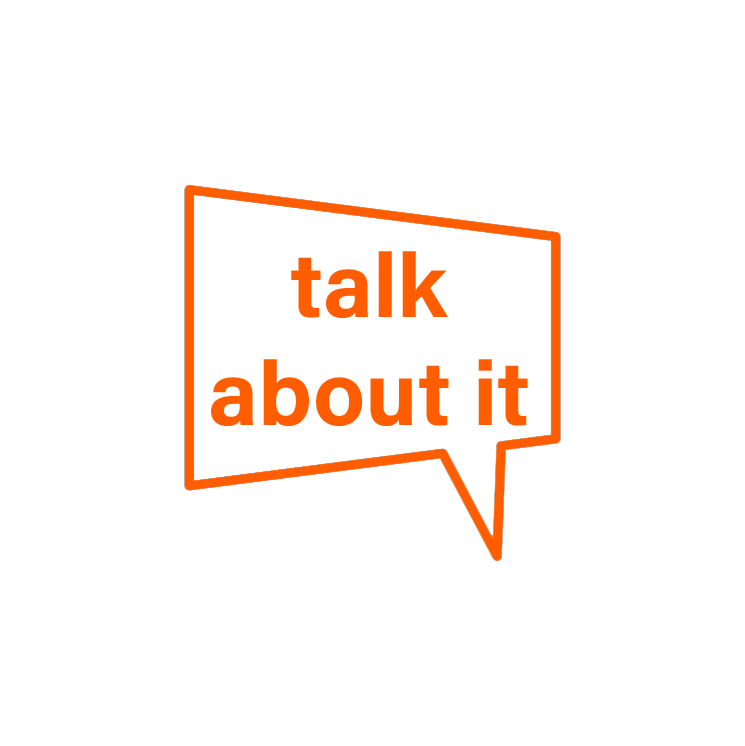
<style>
.page{position:relative;width:745px;height:746px;background:#ffffff}
.page>*{position:absolute;margin:0}
.t1{font:90px "AcuminConcept-Bold";color:#ff5d00}
</style>
<div class="page">
<p class="t1" style="left:211px;top:251px;width:317px;height:175px;text-align:center">talk<br>about it</p>
</div>
